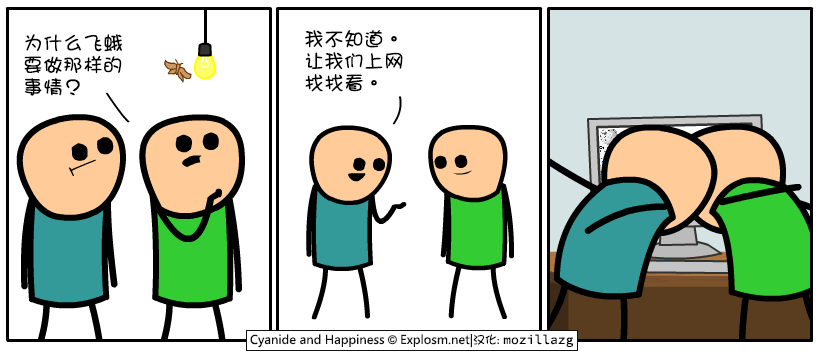
<style>
.page{position:relative;width:820px;height:355px;background:#ffffff}
.page>*{position:absolute;margin:0}
.t1{font:20px/22px "DFGirl";color:#000000}
</style>
<div class="page">
<p class="t1" style="left:304px;top:30px;width:99px;height:62px">我不知道。<br>让我们上网<br>找找看。</p>
<p class="t1" style="left:24px;top:34px;width:98px;height:62px">为什么飞蛾<br>要做那样的<br>事情？</p>
</div>
